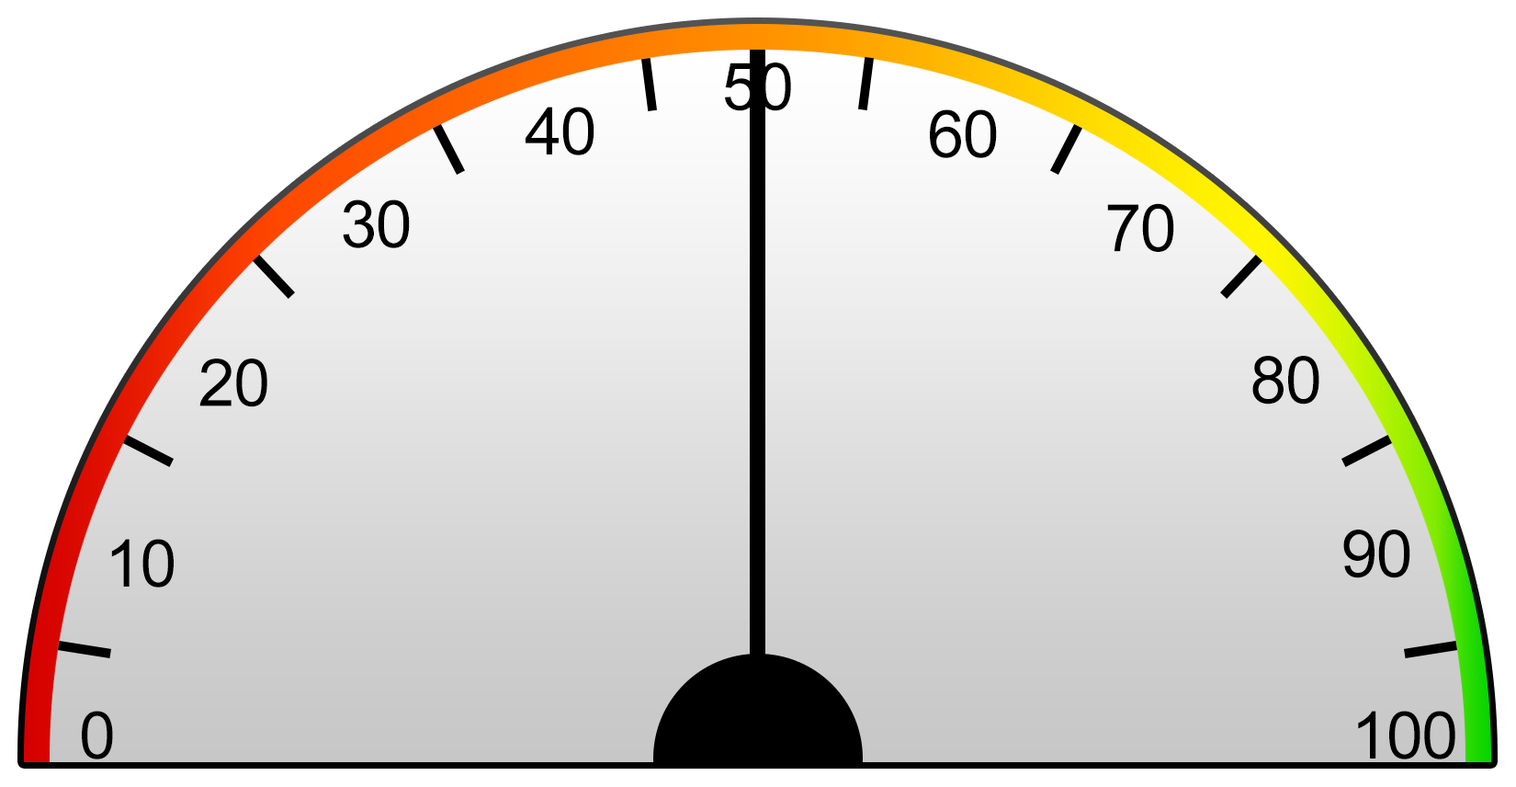
<style>
.page{position:relative;width:1516px;height:787px;background:#ffffff}
.page>*{position:absolute;margin:0}
.t1{font:66.2px "ArialMT";letter-spacing:-0.025em;color:#000000}
</style>
<div class="page">
<p class="t1" style="left:725px;top:62px;width:66px;height:49px">50</p>
<p class="t1" style="left:526px;top:107px;width:68px;height:48px">40</p>
<p class="t1" style="left:930px;top:109px;width:67px;height:49px">60</p>
<p class="t1" style="left:343px;top:199px;width:67px;height:49px">30</p>
<p class="t1" style="left:1107px;top:203px;width:67px;height:49px">70</p>
<p class="t1" style="left:199px;top:358px;width:68px;height:49px">20</p>
<p class="t1" style="left:1252px;top:356px;width:67px;height:48px">80</p>
<p class="t1" style="left:1343px;top:529px;width:67px;height:49px">90</p>
<p class="t1" style="left:111px;top:538px;width:63px;height:49px">10</p>
<p class="t1" style="left:82px;top:710px;width:31px;height:49px">0</p>
<p class="t1" style="left:1358px;top:710px;width:97px;height:49px">100</p>
</div>
